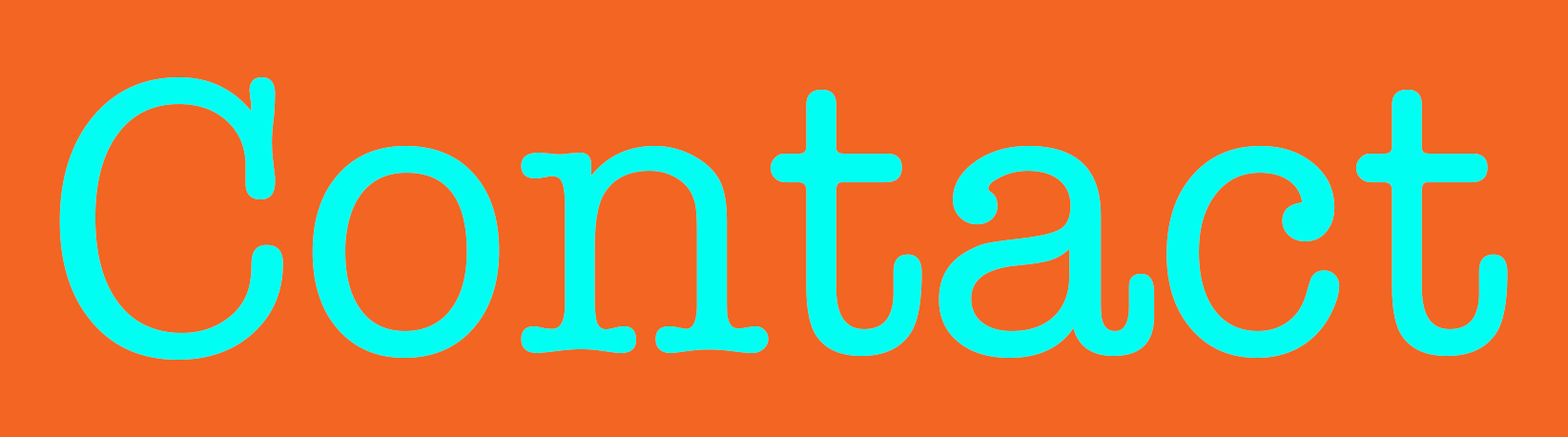
<style>
.page{position:relative;width:1568px;height:437px;background:#f26522}
.page>*{position:absolute;margin:0}
.t1{font:397.4px "AmericanTypewriter";color:#00fff2}
</style>
<div class="page">
<p class="t1" style="left:59px;top:77px;width:1449px;height:283px">Contact</p>
</div>
